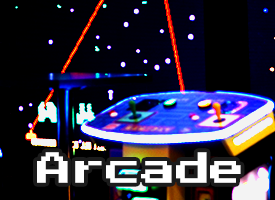
<style>
.page{position:relative;width:275px;height:200px;background:#000000}
.page>*{position:absolute;margin:0}
.t1{font:34.8px "PressStart2P";color:#ffffff}
</style>
<div class="page">
<p class="t1" style="left:37px;top:152px;width:204px;height:31px">Arcade</p>
</div>
